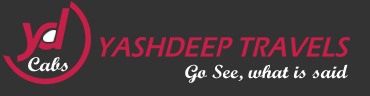
<style>
.page{position:relative;width:370px;height:96px;background:#333333}
.page>*{position:absolute;margin:0}
.t1{font:20px "MonotypeScriptW01-Bold";color:#ffffff;scale:1.09 1}
.t2{font:19px "MonotypeScriptW01-Bold";color:#ffffff;scale:1.09 1}
</style>
<div class="page">
<p class="t1" style="left:28px;top:57px;width:40px;height:15px">Cabs</p>
<p class="t2" style="left:185px;top:64px;width:163px;height:19px">Go See, what is said</p>
</div>
